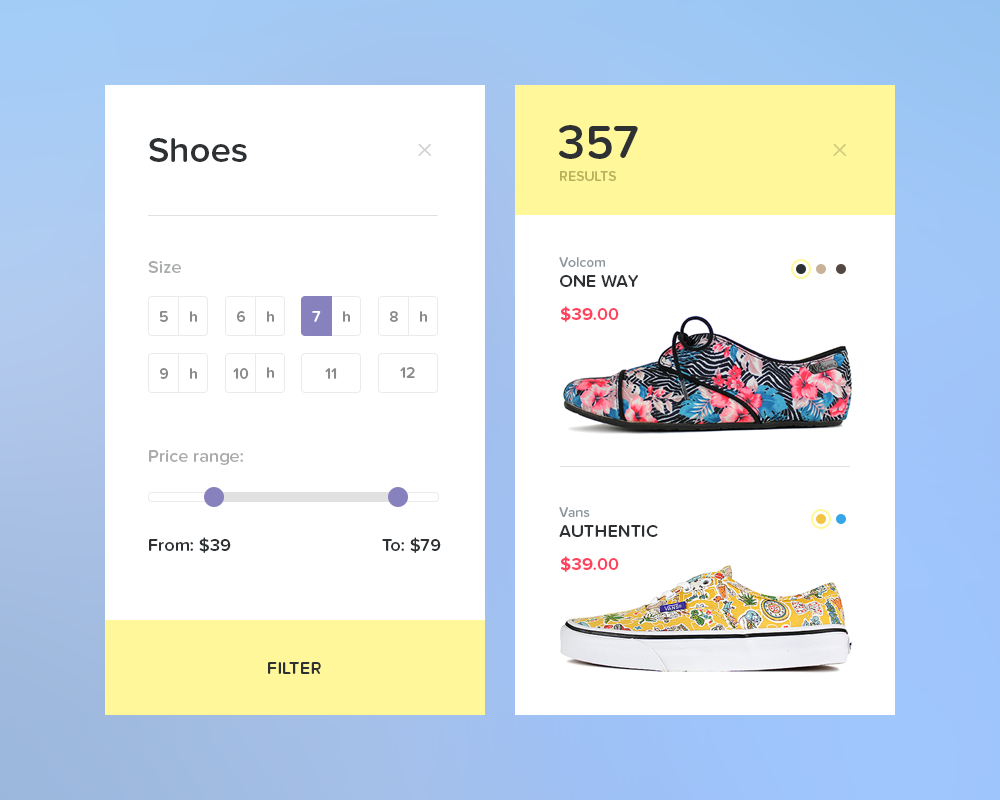
<style>
.page{position:relative;width:1000px;height:800px;background:#ffffff}
.page>*{position:absolute;margin:0}
.t1{font:48px "ProximaNovaSoft-Semibold";color:#2e3133;text-transform:uppercase}
.t2{font:36px "ProximaNovaSoft-Semibold";color:#2e3133}
.t3{font:18px "ProximaNovaSoft-Regular";color:#cfd0d0;scale:1.28 1}
.t4{font:18px "ProximaNovaSoft-Regular";color:#cfc980;scale:1.28 1}
.t5{font:14px "ProximaNovaSoft-Semibold";color:#b7b05d;text-transform:uppercase}
.t6{font:14px "ProximaNovaSoft-Semibold";color:#8b969d}
.t7{font:18px "ProximaNovaSoft-Semibold";color:#abacad}
.t8{font:18px "ProximaNovaSoft-Semibold";color:#2e3133;text-transform:uppercase}
.t9{font:16px "ProximaNovaSoft-Semibold";color:#898a8b}
.t10{font:16px "ProximaNovaSoft-Semibold";color:#ffffff}
.t11{font:18px "ProximaNovaSoft-Bold";color:#ff435e;text-transform:uppercase}
.t12{font:18px "ProximaNovaSoft-Semibold";color:#ff435e;text-transform:uppercase}
.t13{font:18px "ProximaNovaSoft-Semibold";color:#2e3133}
</style>
<div class="page">
<p class="t1" style="left:559px;top:125px;width:79px;height:34px">357</p>
<p class="t2" style="left:149px;top:138px;width:98px;height:24px">Shoes</p>
<p class="t3" style="left:418px;top:144px;width:14px;height:12px">X</p>
<p class="t4" style="left:833px;top:144px;width:14px;height:12px">X</p>
<p class="t5" style="left:560px;top:171px;width:56px;height:10px">RESULTS</p>
<p class="t6" style="left:559px;top:257px;width:46px;height:10px">Volcom</p>
<p class="t7" style="left:148px;top:261px;width:33px;height:12px">Size</p>
<p class="t8" style="left:560px;top:275px;width:78px;height:12px">One WAY</p>
<p class="t9" style="left:160px;top:311px;width:8px;height:11px">5</p>
<p class="t9" style="left:190px;top:311px;width:7px;height:11px">h</p>
<p class="t9" style="left:236px;top:311px;width:10px;height:11px">6</p>
<p class="t9" style="left:267px;top:311px;width:7px;height:11px">h</p>
<p class="t10" style="left:312px;top:311px;width:9px;height:11px">7</p>
<p class="t9" style="left:343px;top:311px;width:7px;height:11px">h</p>
<p class="t9" style="left:389px;top:311px;width:9px;height:11px">8</p>
<p class="t9" style="left:420px;top:311px;width:7px;height:11px">h</p>
<p class="t11" style="left:561px;top:306px;width:58px;height:16px">$39<span class="t12">.00</span></p>
<p class="t9" style="left:159px;top:368px;width:10px;height:11px">9</p>
<p class="t9" style="left:190px;top:368px;width:7px;height:11px">h</p>
<p class="t9" style="left:233px;top:368px;width:16px;height:11px">10</p>
<p class="t9" style="left:267px;top:367px;width:7px;height:11px">h</p>
<p class="t9" style="left:325px;top:368px;width:12px;height:11px">11</p>
<p class="t9" style="left:400px;top:367px;width:15px;height:11px">12</p>
<p class="t7" style="left:149px;top:450px;width:94px;height:15px">Price range:</p>
<p class="t6" style="left:559px;top:507px;width:31px;height:10px">Vans</p>
<p class="t8" style="left:559px;top:525px;width:99px;height:12px">Authentic</p>
<p class="t13" style="left:149px;top:537px;width:82px;height:16px">From: $39</p>
<p class="t13" style="left:382px;top:537px;width:59px;height:16px">To: $79</p>
<p class="t11" style="left:561px;top:556px;width:58px;height:16px">$39<span class="t12">.00</span></p>
<p class="t8" style="left:268px;top:662px;width:53px;height:12px">Filter</p>
</div>
